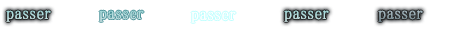
<style>
.page{position:relative;width:465px;height:29px;background:#ffffff}
.page>*{position:absolute;margin:0}
.t1{font:18.1px "MS-PMincho";letter-spacing:0.03em;color:#b0dcdd;font-weight:bold;scale:0.84 1}
.t2{font:18.1px "MS-PMincho";letter-spacing:0.03em;color:#99acb3;font-weight:bold;scale:0.84 1}
</style>
<div class="page">
<p class="t1" style="left:6px;top:10px;width:45px;height:12px">passer</p>
<p class="t1" style="left:284px;top:10px;width:45px;height:12px">passer</p>
<p class="t2" style="left:378px;top:10px;width:45px;height:12px">passer</p>
</div>
